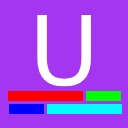
<style>
.page{position:relative;width:128px;height:128px;background:#a435f0}
.page>*{position:absolute;margin:0}
.t1{font:96px "DejaVuSans";color:#ffffff}
</style>
<div class="page">
<p class="t1" style="left:37px;top:15px;width:54px;height:72px">U</p>
</div>
